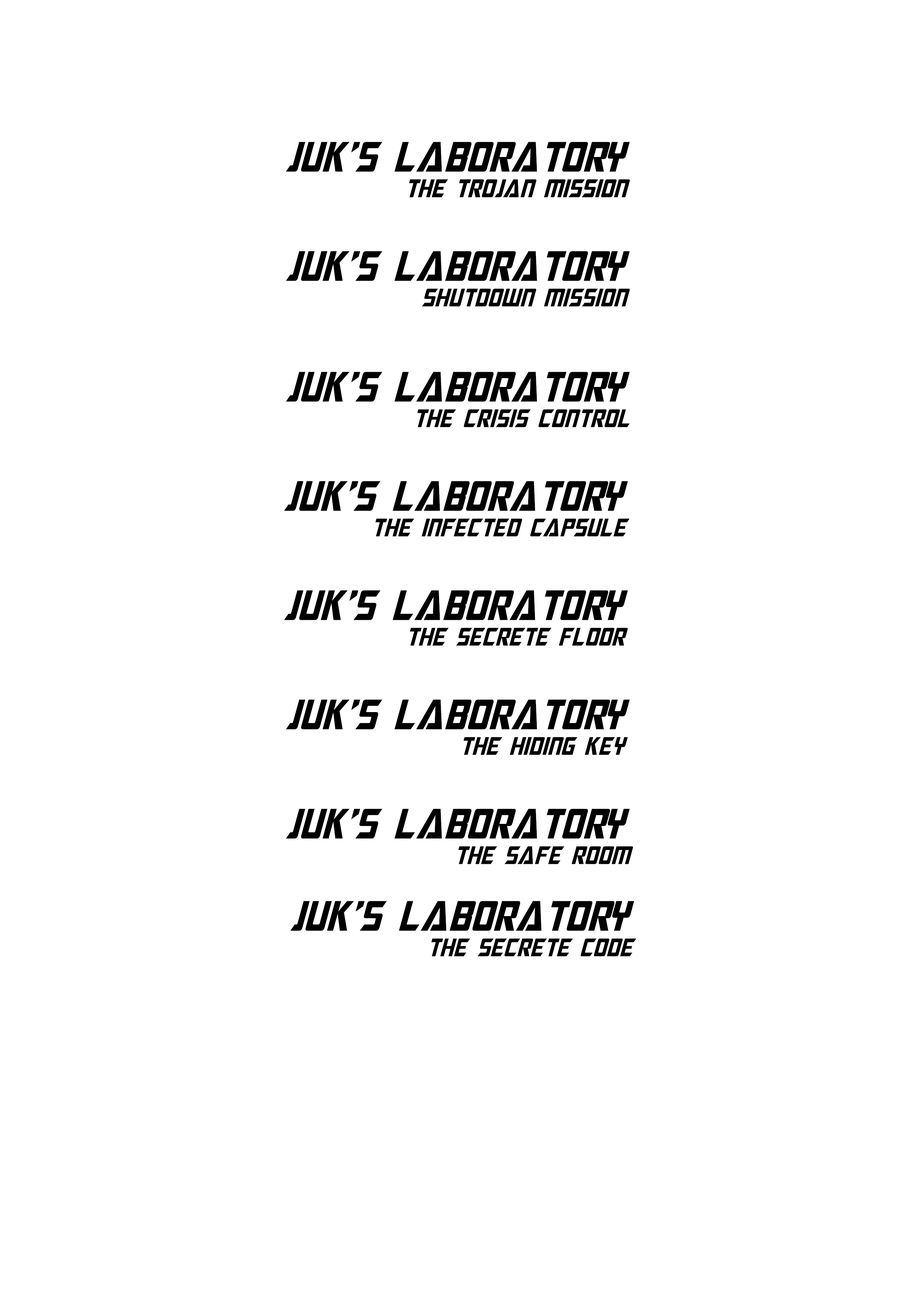
<style>
.page{position:relative;width:918px;height:1299px;background:#ffffff}
.page>*{position:absolute;margin:0}
.t1{font:42.6px "MegatronCondensed-Italic";color:#000000}
.t2{font:25.6px "MegatronCondensed-Italic";color:#000000}
</style>
<div class="page">
<p class="t1" style="left:286px;top:142px;width:344px;height:30px">JUk’S LABOratory</p>
<p class="t2" style="left:409px;top:179px;width:221px;height:18px">the trojan mission</p>
<p class="t2" style="left:409px;top:179px;width:221px;height:18px">the trojan mission</p>
<p class="t1" style="left:286px;top:251px;width:344px;height:30px">JUk’S LABOratory</p>
<p class="t2" style="left:422px;top:288px;width:208px;height:19px">Shutdown mission</p>
<p class="t1" style="left:286px;top:372px;width:344px;height:30px">JUk’S LABOratory</p>
<p class="t2" style="left:417px;top:409px;width:213px;height:18px">the crisis control</p>
<p class="t1" style="left:284px;top:481px;width:344px;height:30px">JUk’S LABOratory</p>
<p class="t2" style="left:375px;top:518px;width:255px;height:18px">the infected capsule</p>
<p class="t1" style="left:284px;top:590px;width:344px;height:30px">JUk’S LABOratory</p>
<p class="t2" style="left:410px;top:628px;width:218px;height:18px">the secrete floor</p>
<p class="t1" style="left:286px;top:699px;width:344px;height:30px">JUk’S LABOratory</p>
<p class="t2" style="left:464px;top:737px;width:164px;height:18px">the hiding key</p>
<p class="t1" style="left:286px;top:809px;width:344px;height:30px">JUk’S LABOratory</p>
<p class="t2" style="left:458px;top:846px;width:175px;height:18px">the safe room</p>
<p class="t1" style="left:290px;top:901px;width:345px;height:30px">JUk’S LABOratory</p>
<p class="t2" style="left:431px;top:938px;width:205px;height:18px">the secrete code</p>
</div>
